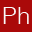
<style>
.page{position:relative;width:32px;height:32px;background:#aa0909}
.page>*{position:absolute;margin:0}
.t1{font:24px "Helvetica-Light";color:#f8f8f8}
</style>
<div class="page">
<p class="t1" style="left:3px;top:7px;width:26px;height:17px">Ph</p>
</div>
